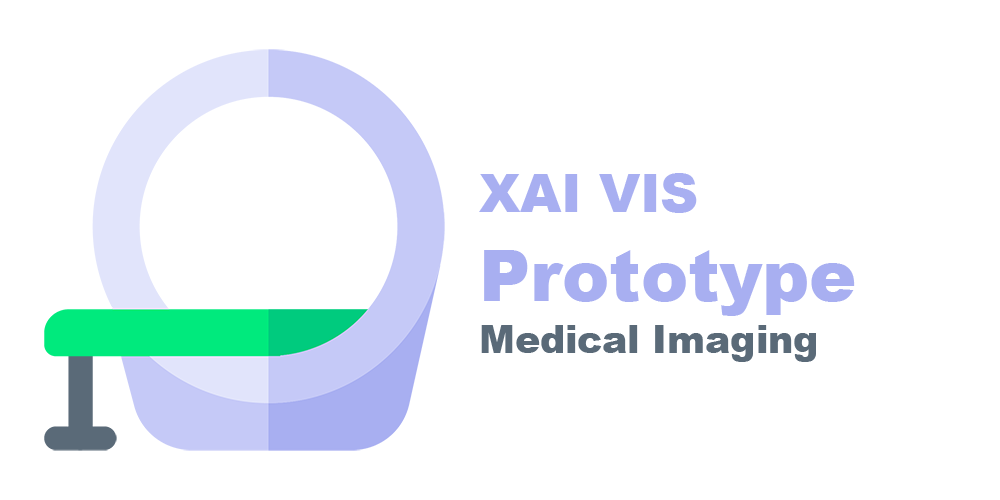
<style>
.page{position:relative;width:1000px;height:500px;background:#ffffff}
.page>*{position:absolute;margin:0}
.t1{font:52.7px "Arial-Black";color:#a8aff1}
.t2{font:70.5px "Arial-Black";color:#a8aff1}
.t3{font:37.6px "Arial-Black";color:#5a6a78}
</style>
<div class="page">
<p class="t1" style="left:479px;top:173px;width:218px;height:40px">XAI VIS</p>
<p class="t2" style="left:484px;top:250px;width:371px;height:66px">Prototype</p>
<p class="t3" style="left:481px;top:325px;width:335px;height:37px">Medical Imaging</p>
</div>
